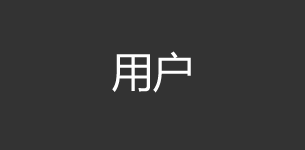
<style>
.page{position:relative;width:305px;height:150px;background:#333333}
.page>*{position:absolute;margin:0}
.t1{font:41.7px "MicrosoftYaHei";color:#ffffff}
</style>
<div class="page">
<p class="t1" style="left:112px;top:51px;width:79px;height:42px">用户</p>
</div>
